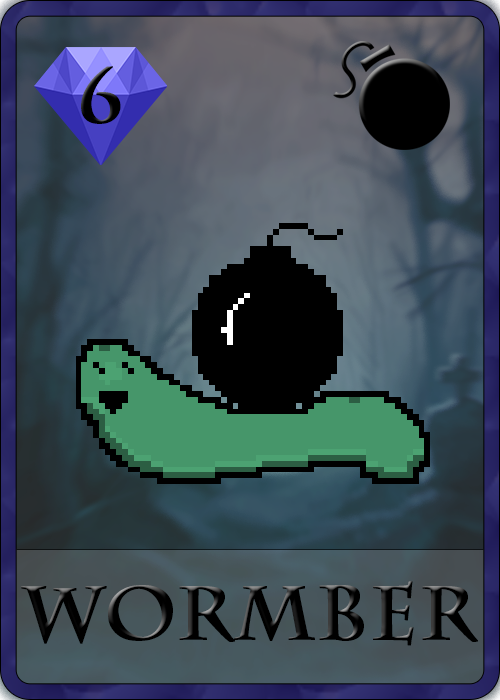
<style>
.page{position:relative;width:500px;height:700px}
.page>*{position:absolute;margin:0}
.t1{font:75px "CharlemagneStd-Bold";color:#000000;font-weight:bold}
</style>
<div class="page">
<p class="t1" style="left:81px;top:66px;width:40px;height:58px">6</p>
<p class="t1" style="left:21px;top:581px;width:457px;height:65px">Wormber</p>
</div>
